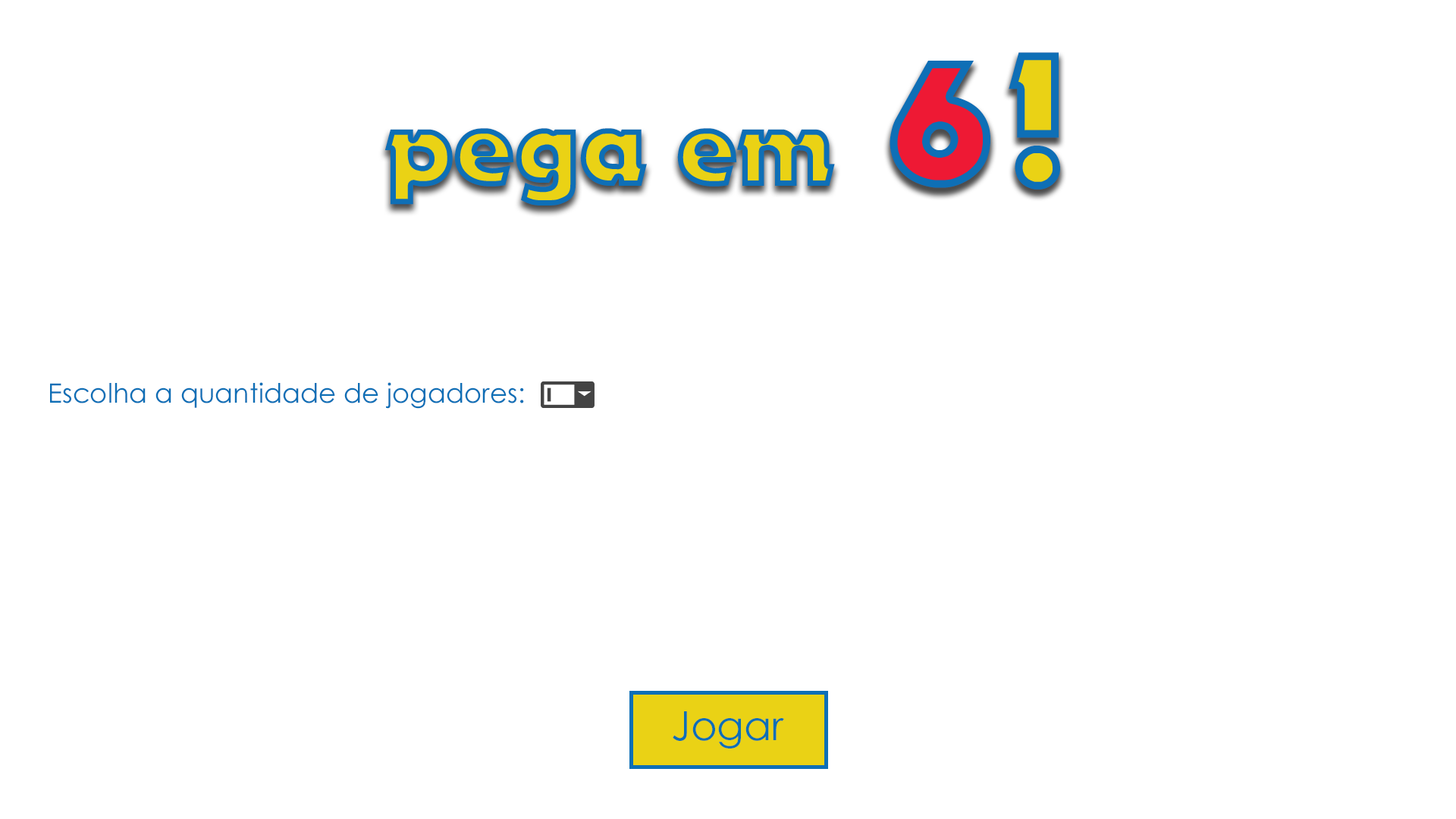
<style>
.page{position:relative;width:1456px;height:819px;background:#ffffff}
.page>*{position:absolute;margin:0}
.t1{font:187.3px "November"}
.t2{font:173.9px "November";color:#ee1934}
.t3{font:107px "November"}
.t4{font:26.8px "CenturyGothic";color:#0e6fb6}
.t5{font:40.1px "CenturyGothic";color:#0e6fb6}
</style>
<div class="page">
<p class="t1" style="left:1009px;top:52px;width:51px;height:138px">!</p>
<p class="t2" style="left:890px;top:61px;width:100px;height:127px">6</p>
<p class="t3" style="left:385px;top:128px;width:450px;height:78px">pega em</p>
<p class="t4" style="left:50px;top:382px;width:474px;height:27px">Escolha a quantidade de jogadores:</p>
<p class="t5" style="left:673px;top:711px;width:111px;height:37px">Jogar</p>
</div>
